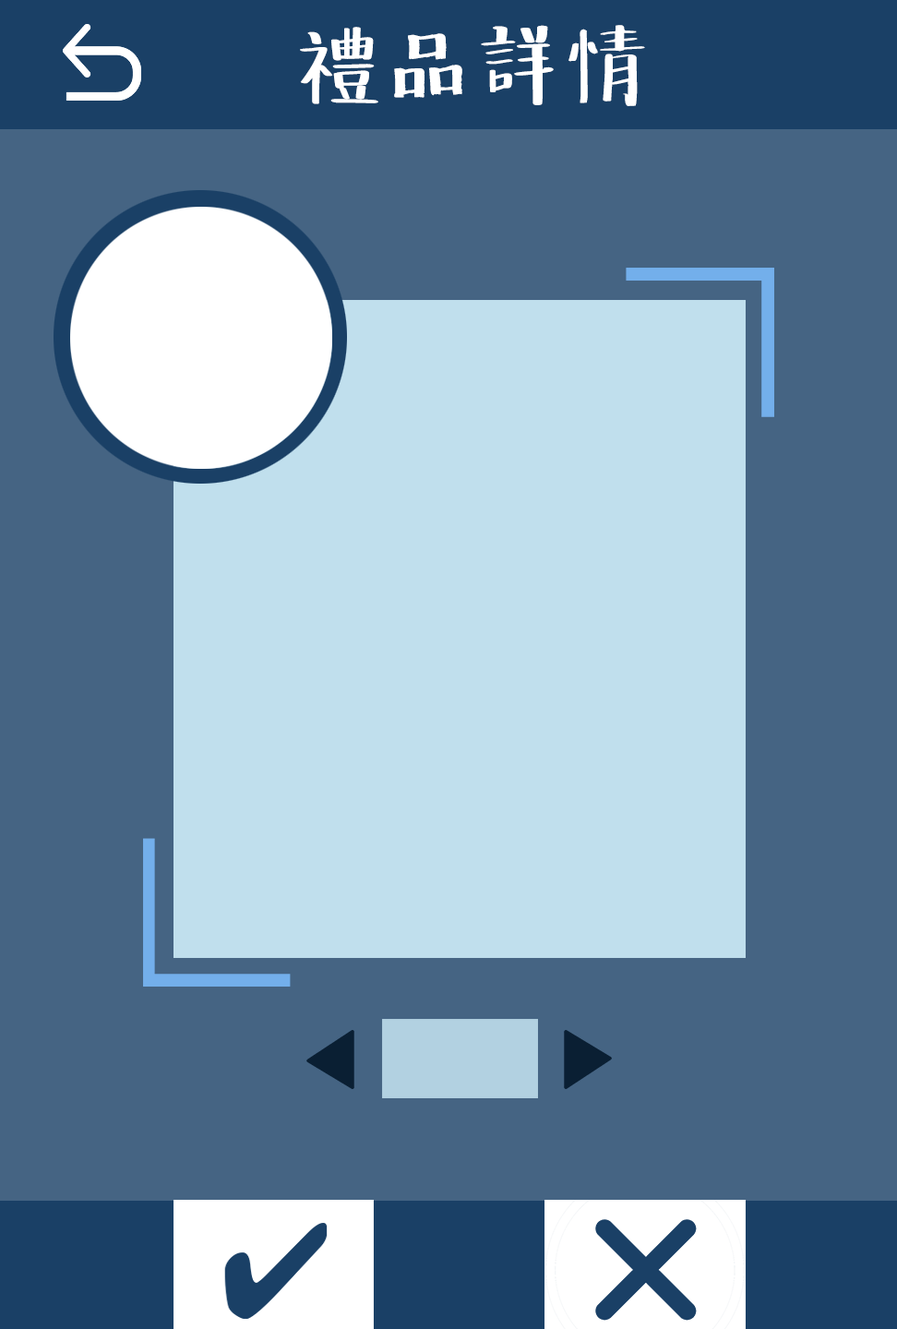
<style>
.page{position:relative;width:897px;height:1329px;background:#456483}
.page>*{position:absolute;margin:0}
.t1{font:83.1px "HanyiSentyChalkOriginal";color:#ffffff}
</style>
<div class="page">
<p class="t1" style="left:300px;top:25px;width:345px;height:81px">禮品詳情</p>
</div>
